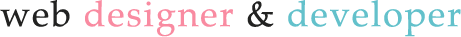
<style>
.page{position:relative;width:461px;height:37px;background:#ffffff}
.page>*{position:absolute;margin:0}
.t1{font:36px "Palatino-Roman";letter-spacing:0.05em;color:#63c1cb}
.t2{font:36px "Palatino-Roman";letter-spacing:0.05em;color:#222221}
.t3{font:36px "Palatino-Roman";letter-spacing:0.05em;color:#f98ba1}
</style>
<div class="page">
<p class="t1" style="left:0px;top:0px;width:461px;height:37px"><span class="t2">web </span><span class="t3">designer</span><span class="t2"> &amp; </span>developer</p>
</div>
